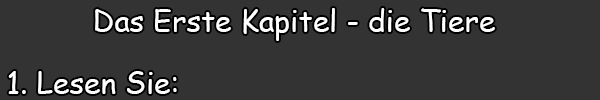
<style>
.page{position:relative;width:600px;height:100px;background:#333333}
.page>*{position:absolute;margin:0}
.t1{font:30px "ComicSansMS";color:#ffffff}
</style>
<div class="page">
<p class="t1" style="left:95px;top:8px;width:400px;height:33px">Das Erste Kapitel - die Tiere</p>
<p class="t1" style="left:8px;top:71px;width:169px;height:23px">1. Lesen Sie:</p>
</div>
